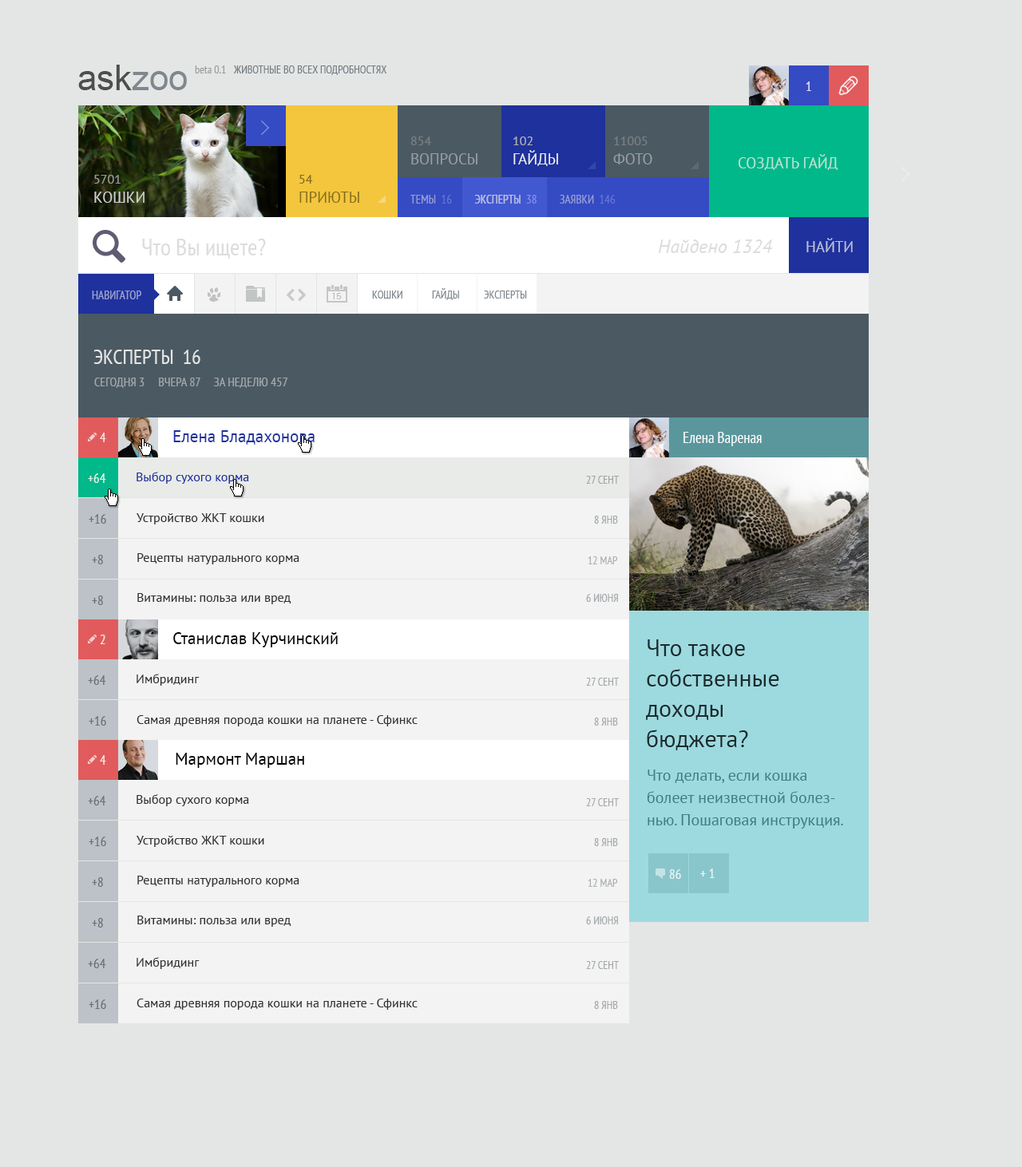
<style>
.page{position:relative;width:1022px;height:1167px;background:#e4e6e5}
.page>*{position:absolute;margin:0}
.t1{font:35.1px "ArialMT"}
.t2{font:11.2px "PTSans-Narrow";color:#9a9c9b}
.t3{font:11.2px "PTSans-Narrow";color:#737d82;text-transform:uppercase}
.t4{font:13.6px "PTSans-Narrow";color:#e1e3f4}
.t5{font:15.2px/19.2px "PTSans-Regular";color:#989ea3;text-transform:uppercase}
.t6{font:12.8px/19.2px "PTSans-Regular";color:#989ea3;text-transform:uppercase}
.t7{font:15.2px/19.2px "PTSans-Regular";color:#ebecee;text-transform:uppercase}
.t8{font:12.8px/19.2px "PTSans-Regular";color:#aeaeae;text-transform:uppercase}
.t9{font:12.8px/19.2px "PTSans-Regular";text-transform:uppercase}
.t10{font:15.2px/19.2px "PTSans-Regular";text-transform:uppercase}
.t11{font:15.2px "PTSans-Regular";color:#b8e4d5;text-transform:uppercase}
.t12{font:15.2px/19.2px "PTSans-Regular";color:#cdcecf;text-transform:uppercase}
.t13{font:12.8px/19.2px "PTSans-Regular";color:#cdcecf;text-transform:uppercase}
.t14{font:15.2px/19.2px "PTSans-Regular";color:#866c1d;text-transform:uppercase}
.t15{font:12.8px/19.2px "PTSans-Regular";color:#866c1d;text-transform:uppercase}
.t16{font:12px "PTSans-Narrow";text-transform:uppercase}
.t17{font:12px "PTSans-Narrow";color:#b6bbe4;text-transform:uppercase}
.t18{font:23.9px "PTSans-Narrow";color:#dddddd}
.t19{font:19.2px "PTSans-Italic";color:#dddddd}
.t20{font:15.2px "PTSans-Regular";color:#bcbfdb;text-transform:uppercase}
.t21{font:12px "PTSans-Narrow";color:#9ea3cd;text-transform:uppercase}
.t22{font:11.2px "PTSans-Narrow";color:#7b848a;text-transform:uppercase}
.t23{font:20.8px "PTSans-Narrow";color:#e3e4e5;text-transform:uppercase}
.t24{font:12.8px "PTSans-Narrow";color:#a2a8ac;text-transform:uppercase}
.t25{font:13.6px "PTSans-Narrow";color:#f9e4e5}
.t26{font:16.8px "PTSans-Regular";color:#1e319d}
.t27{font:13.6px "PTSans-Narrow";color:#ddf2eb}
.t28{font:12.8px "PTSans-Regular";color:#1e319d}
.t29{font:11.2px "PTSans-Narrow";color:#9fa5a7;text-transform:uppercase}
.t30{font:13.6px "PTSans-Narrow";color:#67727a}
.t31{font:12.8px/39.9px "PTSans-Regular";color:#313131}
.t32{font:11.2px "PTSans-Narrow";color:#a4a9ac;text-transform:uppercase}
.t33{font:11.2px "PTSans-Narrow";color:#abb0b3;text-transform:uppercase}
.t34{font:16.8px "PTSans-Regular";color:#000000}
.t35{font:12.8px "PTSans-Regular";color:#313131}
</style>
<div class="page">
<p class="t1" style="left:78px;top:65px;width:109px;height:25px">askzoo</p>
<p class="t2" style="left:195px;top:65px;width:31px;height:8px">beta 0.1</p>
<p class="t3" style="left:233px;top:65px;width:154px;height:10px">животные во всех подробностях</p>
<p class="t4" style="left:805px;top:81px;width:6px;height:10px">1</p>
<p class="t5" style="left:411px;top:137px;width:66px;height:27px"><span class="t6">854<br></span>вопросы</p>
<p class="t7" style="left:513px;top:137px;width:45px;height:29px"><span class="t8">102<br></span>гайды</p>
<p class="t9" style="left:613px;top:137px;width:39px;height:27px">11005<br><span class="t10">фото</span></p>
<p class="t11" style="left:738px;top:154px;width:99px;height:16px">создать гайд</p>
<p class="t12" style="left:94px;top:175px;width:50px;height:28px"><span class="t13">5701<br></span>кошки</p>
<p class="t14" style="left:299px;top:175px;width:60px;height:28px"><span class="t15">54<br></span>приюты</p>
<p class="t16" style="left:410px;top:195px;width:205px;height:9px">темы  16         эксперты  38         заявки  146</p>
<p class="t17" style="left:475px;top:195px;width:61px;height:9px">эксперты  38</p>
<p class="t18" style="left:142px;top:239px;width:124px;height:20px">Что Вы ищете?</p>
<p class="t19" style="left:658px;top:239px;width:115px;height:14px">Найдено 1324</p>
<p class="t20" style="left:806px;top:238px;width:47px;height:14px">Найти</p>
<p class="t21" style="left:92px;top:291px;width:49px;height:8px">навигатор</p>
<p class="t22" style="left:372px;top:291px;width:30px;height:8px">кошки</p>
<p class="t22" style="left:432px;top:288px;width:27px;height:12px">гайды</p>
<p class="t22" style="left:484px;top:291px;width:43px;height:8px">эксперты</p>
<p class="t23" style="left:93px;top:350px;width:107px;height:14px">эксперты  16</p>
<p class="t24" style="left:94px;top:378px;width:193px;height:10px">сегодня 3     вчера 87     за неделю 457</p>
<p class="t25" style="left:100px;top:433px;width:6px;height:9px">4</p>
<p class="t26" style="left:173px;top:430px;width:142px;height:15px">Елена Бладахонова</p>
<p class="t27" style="left:88px;top:473px;width:18px;height:10px">+64</p>
<p class="t28" style="left:137px;top:472px;width:112px;height:12px">Выбор сухого корма</p>
<p class="t29" style="left:586px;top:476px;width:33px;height:8px">27 сент</p>
<p class="t30" style="left:89px;top:514px;width:17px;height:10px">+16</p>
<p class="t31" style="left:137px;top:513px;width:162px;height:91px">Устройство ЖКТ кошки<br>Рецепты натурального корма<br>Витамины: польза или вред</p>
<p class="t32" style="left:594px;top:516px;width:24px;height:8px">8 янв</p>
<p class="t30" style="left:92px;top:555px;width:11px;height:9px">+8</p>
<p class="t33" style="left:588px;top:556px;width:30px;height:8px">12 мар</p>
<p class="t32" style="left:586px;top:594px;width:32px;height:8px">6 июня</p>
<p class="t30" style="left:92px;top:595px;width:11px;height:10px">+8</p>
<p class="t25" style="left:100px;top:635px;width:5px;height:9px">2</p>
<p class="t34" style="left:173px;top:632px;width:165px;height:15px">Станислав Курчинский</p>
<p class="t30" style="left:88px;top:675px;width:18px;height:10px">+64</p>
<p class="t35" style="left:137px;top:674px;width:63px;height:12px">Имбридинг</p>
<p class="t32" style="left:586px;top:678px;width:33px;height:8px">27 сент</p>
<p class="t30" style="left:89px;top:716px;width:17px;height:10px">+16</p>
<p class="t35" style="left:137px;top:715px;width:280px;height:11px">Самая древняя порода кошки на планете - Сфинкс</p>
<p class="t32" style="left:594px;top:718px;width:24px;height:8px">8 янв</p>
<p class="t25" style="left:100px;top:755px;width:6px;height:10px">4</p>
<p class="t34" style="left:176px;top:753px;width:128px;height:15px">Мармонт Маршан</p>
<p class="t30" style="left:88px;top:796px;width:18px;height:9px">+64</p>
<p class="t35" style="left:137px;top:794px;width:112px;height:12px">Выбор сухого корма</p>
<p class="t32" style="left:586px;top:798px;width:33px;height:8px">27 сент</p>
<p class="t30" style="left:89px;top:837px;width:17px;height:9px">+16</p>
<p class="t31" style="left:137px;top:836px;width:162px;height:91px">Устройство ЖКТ кошки<br>Рецепты натурального корма<br>Витамины: польза или вред</p>
<p class="t32" style="left:594px;top:838px;width:24px;height:8px">8 янв</p>
<p class="t30" style="left:92px;top:877px;width:11px;height:10px">+8</p>
<p class="t33" style="left:588px;top:879px;width:30px;height:8px">12 мар</p>
<p class="t30" style="left:92px;top:918px;width:11px;height:10px">+8</p>
<p class="t32" style="left:586px;top:916px;width:32px;height:8px">6 июня</p>
<p class="t30" style="left:88px;top:959px;width:18px;height:9px">+64</p>
<p class="t35" style="left:137px;top:957px;width:63px;height:12px">Имбридинг</p>
<p class="t32" style="left:586px;top:961px;width:33px;height:8px">27 сент</p>
<p class="t30" style="left:89px;top:999px;width:17px;height:10px">+16</p>
<p class="t35" style="left:137px;top:999px;width:280px;height:11px">Самая древняя порода кошки на планете - Сфинкс</p>
<p class="t32" style="left:594px;top:1001px;width:24px;height:8px">8 янв</p>
</div>
